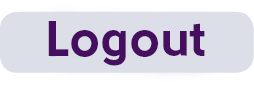
<style>
.page{position:relative;width:254px;height:85px;background:#dcdfe8}
.page>*{position:absolute;margin:0}
.t1{font:50px "Solomon-Sans-Bold";color:#460e5e}
</style>
<div class="page">
<p class="t1" style="left:48px;top:21px;width:157px;height:45px">Logout</p>
</div>
